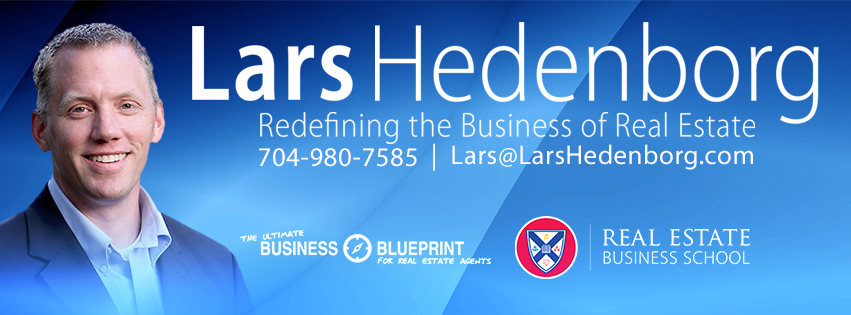
<style>
.page{position:relative;width:851px;height:315px}
.page>*{position:absolute;margin:0}
.t1{font:109.6px "MyriadPro-SemiboldSemiCn";letter-spacing:0.02em;color:#ffffff;scale:0.91 1}
.t2{font:111.7px "MyriadPro-LightSemiCn";color:#ffffff}
.t3{font:34.7px "MyriadPro-LightSemiCn";letter-spacing:0.02em;color:#ffffff}
.t4{font:27px "MyriadPro-Regular";letter-spacing:0.02em;color:#ffffff}
</style>
<div class="page">
<p class="t1" style="left:192px;top:26px;width:161px;height:75px">Lars</p>
<p class="t2" style="left:375px;top:22px;width:444px;height:102px">Hedenborg</p>
<p class="t3" style="left:260px;top:112px;width:495px;height:32px">Redefining the Business of Real Estate</p>
<p class="t4" style="left:259px;top:148px;width:158px;height:19px">704-980-7585</p>
<p class="t4" style="left:433px;top:143px;width:2px;height:28px">|</p>
<p class="t4" style="left:452px;top:144px;width:301px;height:26px">Lars@LarsHedenborg.com</p>
</div>
